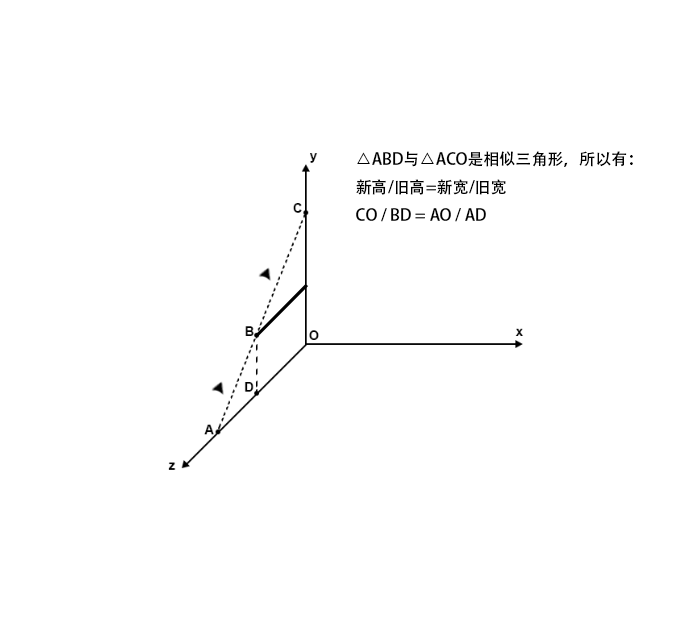
<style>
.page{position:relative;width:690px;height:622px;background:#ffffff}
.page>*{position:absolute;margin:0}
.t1{font:12px "AdobeHeitiStd-Regular";color:#000000}
</style>
<div class="page">
<p class="t1" style="left:356px;top:151px;width:277px;height:71px">△ABD与△ACO是相似三角形，所以有：<br>新高/旧高=新宽/旧宽<br>CO / BD = AO / AD</p>
</div>
